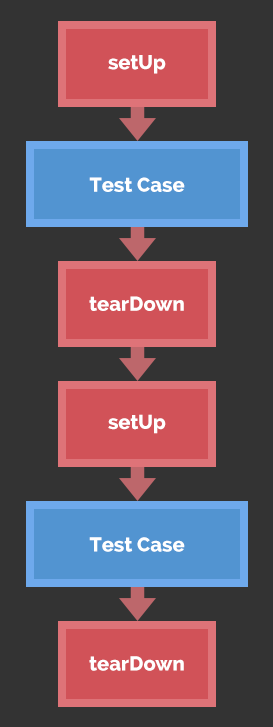
<style>
.page{position:relative;width:273px;height:727px;background:#333333}
.page>*{position:absolute;margin:0}
.t1{font:20.1px "Raleway-ExtraBold";color:#ffffff}
</style>
<div class="page">
<p class="t1" style="left:108px;top:55px;width:58px;height:19px">setUp</p>
<p class="t1" style="left:89px;top:177px;width:96px;height:15px">Test Case</p>
<p class="t1" style="left:89px;top:296px;width:95px;height:15px">tearDown</p>
<p class="t1" style="left:108px;top:414px;width:58px;height:20px">setUp</p>
<p class="t1" style="left:89px;top:537px;width:96px;height:15px">Test Case</p>
<p class="t1" style="left:89px;top:656px;width:95px;height:15px">tearDown</p>
</div>
